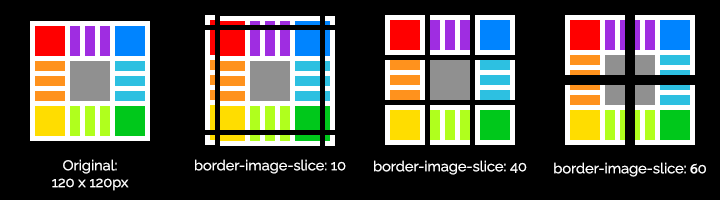
<style>
.page{position:relative;width:720px;height:200px;background:#000000}
.page>*{position:absolute;margin:0}
.t1{font:14px "Raleway-Regular";color:#ffffff;scale:1.05 1}
.t2{font:14px "MyriadPro-Regular";color:#ffffff;scale:1.05 1}
</style>
<div class="page">
<p class="t1" style="left:52px;top:159px;width:77px;height:32px;text-align:center">Original:<br>120 x 120px</p>
<p class="t1" style="left:195px;top:159px;width:151px;height:15px">border-image-slice: 10</p>
<p class="t1" style="left:374px;top:160px;width:153px;height:15px">border-image-slice: 40</p>
<p class="t1" style="left:554px;top:162px;width:152px;height:15px">border-image-slice: <span class="t2">6</span>0</p>
</div>
